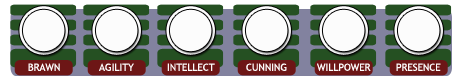
<style>
.page{position:relative;width:463px;height:80px;background:#fcfcfc}
.page>*{position:absolute;margin:0}
.t1{font:10px "TrebuchetMS";color:#fcfcfc}
</style>
<div class="page">
<p class="t1" style="left:28px;top:63px;width:32px;height:8px">BRAWN</p>
<p class="t1" style="left:99px;top:63px;width:35px;height:8px">AGILITY</p>
<p class="t1" style="left:167px;top:63px;width:48px;height:8px">INTELLECT</p>
<p class="t1" style="left:246px;top:63px;width:41px;height:8px">CUNNING</p>
<p class="t1" style="left:317px;top:63px;width:54px;height:8px">WILLPOWER</p>
<p class="t1" style="left:396px;top:63px;width:45px;height:8px">PRESENCE</p>
</div>
